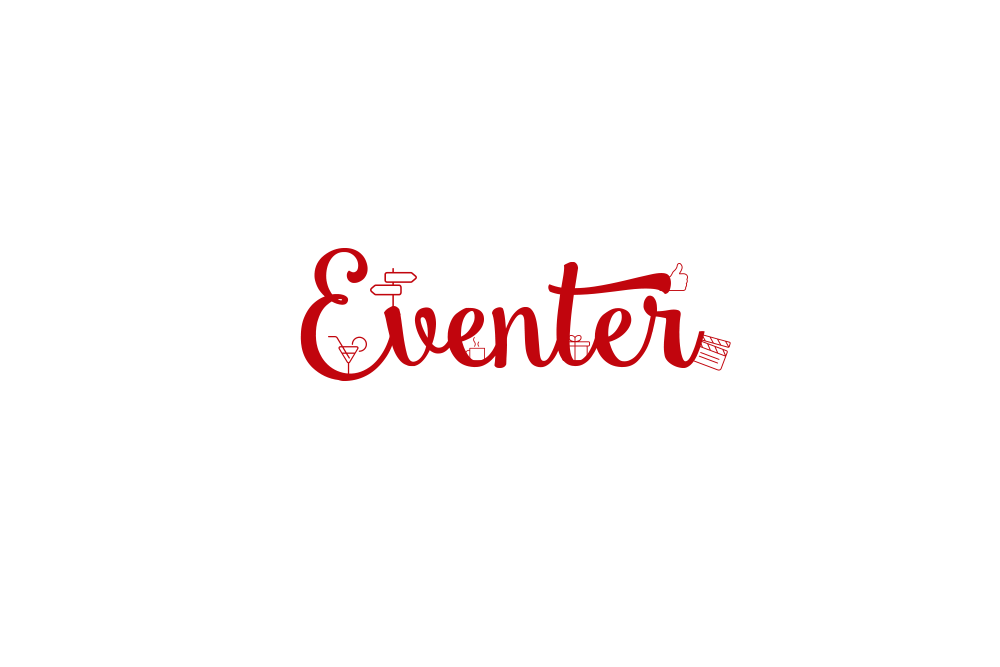
<style>
.page{position:relative;width:1000px;height:667px;background:#ffffff}
.page>*{position:absolute;margin:0}
.t1{font:150px "Smoothie_Shoppe";color:#c1050d}
</style>
<div class="page">
<p class="t1" style="left:300px;top:248px;width:405px;height:133px">Eventer</p>
</div>
